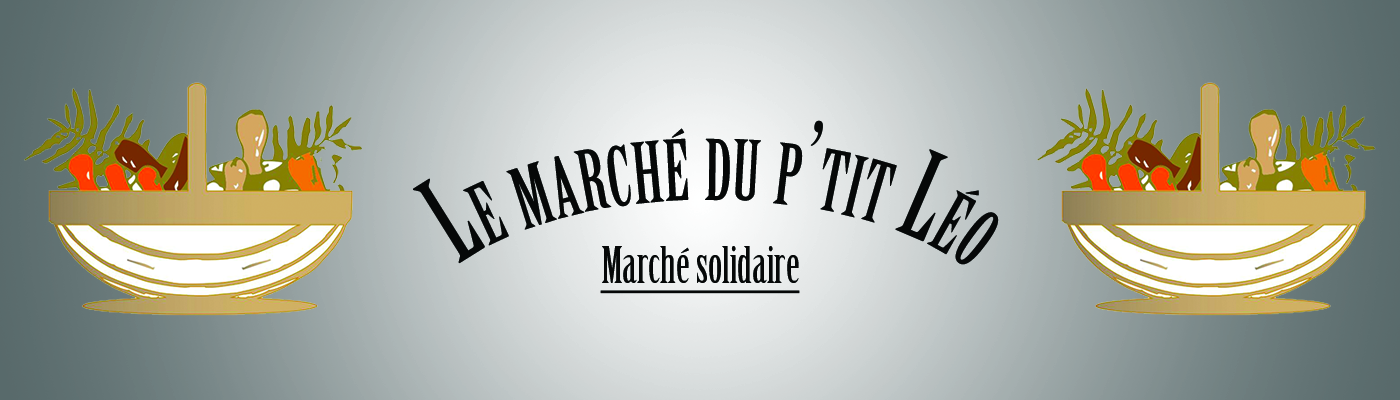
<style>
.page{position:relative;width:1400px;height:400px}
.page>*{position:absolute;margin:0}
.t1{font:116.7px "BirchStd";color:#060808;font-variant:small-caps}
.t2{font:50px "BirchStd";color:#060808;text-decoration:underline}
</style>
<div class="page">
<p class="t1" style="left:413px;top:120px;width:586px;height:145px">Le marché du p’tit Léo</p>
<p class="t2" style="left:600px;top:246px;width:200px;height:48px">Marché solidaire</p>
</div>
